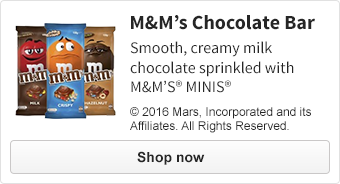
<style>
.page{position:relative;width:340px;height:184px;background:#ffffff}
.page>*{position:absolute;margin:0}
.t1{font:20px "SourceSansPro-Bold";color:#262626}
.t2{font:16px "SourceSansPro-Regular";color:#262626}
.t3{font:12px "ArialMT";color:#262626}
.t4{font:14px "Arial-BoldMT";color:#262626}
</style>
<div class="page">
<p class="t1" style="left:131px;top:15px;width:184px;height:15px">M&amp;M’s Chocolate Bar</p>
<p class="t2" style="left:130px;top:41px;width:164px;height:52px">Smooth, creamy milk<br>chocolate sprinkled with M&amp;M’S® MINIS®</p>
<p class="t3" style="left:130px;top:107px;width:181px;height:26px">© 2016 Mars, Incorporated and its Affiliates. All Rights Reserved.</p>
<p class="t4" style="left:137px;top:151px;width:68px;height:14px">Shop now</p>
</div>
